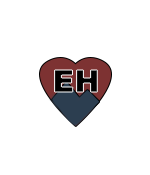
<style>
.page{position:relative;width:150px;height:175px;background:#ffffff}
.page>*{position:absolute;margin:0}
.t1{font:30px "Arial-Black";color:#000000}
</style>
<div class="page">
<p class="t1" style="left:54px;top:70px;width:44px;height:22px">EH</p>
</div>
